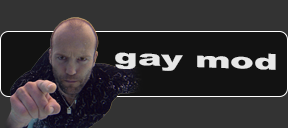
<style>
.page{position:relative;width:288px;height:128px;background:#333333}
.page>*{position:absolute;margin:0}
.t1{font:22px "Arial-Black";color:#e7e7e7;scale:1.61 1}
</style>
<div class="page">
<p class="t1" style="left:115px;top:52px;width:161px;height:19px;rotate:2deg">gay mod</p>
</div>
